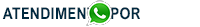
<style>
.page{position:relative;width:200px;height:27px;background:#ffffff}
.page>*{position:absolute;margin:0}
.t1{font:16.1px "ArialNova-Bold";letter-spacing:0.025em;color:#002940;scale:0.87 1}
</style>
<div class="page">
<p class="t1" style="left:2px;top:7px;width:138px;height:13px">ATENDIMENTO POR</p>
</div>
